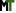
<style>
.page{position:relative;width:16px;height:13px;background:#ffffff}
.page>*{position:absolute;margin:0}
.t1{font:11.8px "NDLOGOS";color:#000000;scale:0.78 1}
.t2{font:11.8px "NDLOGOS";color:#346812;scale:0.78 1}
</style>
<div class="page">
<p class="t1" style="left:0px;top:0px;width:9px;height:11px">M</p>
<p class="t2" style="left:6px;top:0px;width:9px;height:11px">T</p>
</div>
